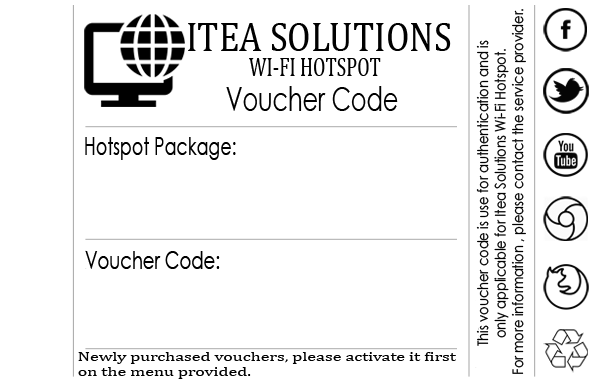
<style>
.page{position:relative;width:600px;height:382px;background:#ffffff}
.page>*{position:absolute;margin:0}
.t1{font:14.6px "CenturyGothic";color:#000000;scale:0.88 1}
.t2{font:41.7px "Cambria";color:#000000;scale:0.86 1}
.t3{font:27.3px "Cambria";color:#000000;scale:0.7 1}
.t4{font:33.3px "CenturyGothic";color:#000000;scale:0.71 1}
.t5{font:25px "CenturyGothic";color:#000000;scale:0.7 1}
.t6{font:25px "CenturyGothic";color:#000000;scale:0.72 1}
.t7{font:12.5px "Cambria";color:#000000;scale:1.44 1}
</style>
<div class="page">
<p class="t1" style="left:476px;top:9px;width:50px;height:365px;text-align:center;rotate:-90deg">This voucher code is use for authentication and is <br>only applicable for Itea Solutions Wi-Fi Hotspot. <br>For more information , please contact the service provider.</p>
<p class="t2" style="left:188px;top:23px;width:263px;height:28px">ITEA SOLUTIONS</p>
<p class="t3" style="left:249px;top:58px;width:132px;height:18px">WI-FI HOTSPOT</p>
<p class="t4" style="left:226px;top:86px;width:172px;height:25px">Voucher Code</p>
<p class="t5" style="left:85px;top:137px;width:151px;height:23px">Hotspot Package:</p>
<p class="t6" style="left:85px;top:251px;width:135px;height:18px">Voucher Code:</p>
<p class="t7" style="left:78px;top:352px;width:378px;height:27px">Newly purchased vouchers, please activate it first <br>on the menu provided.</p>
</div>
